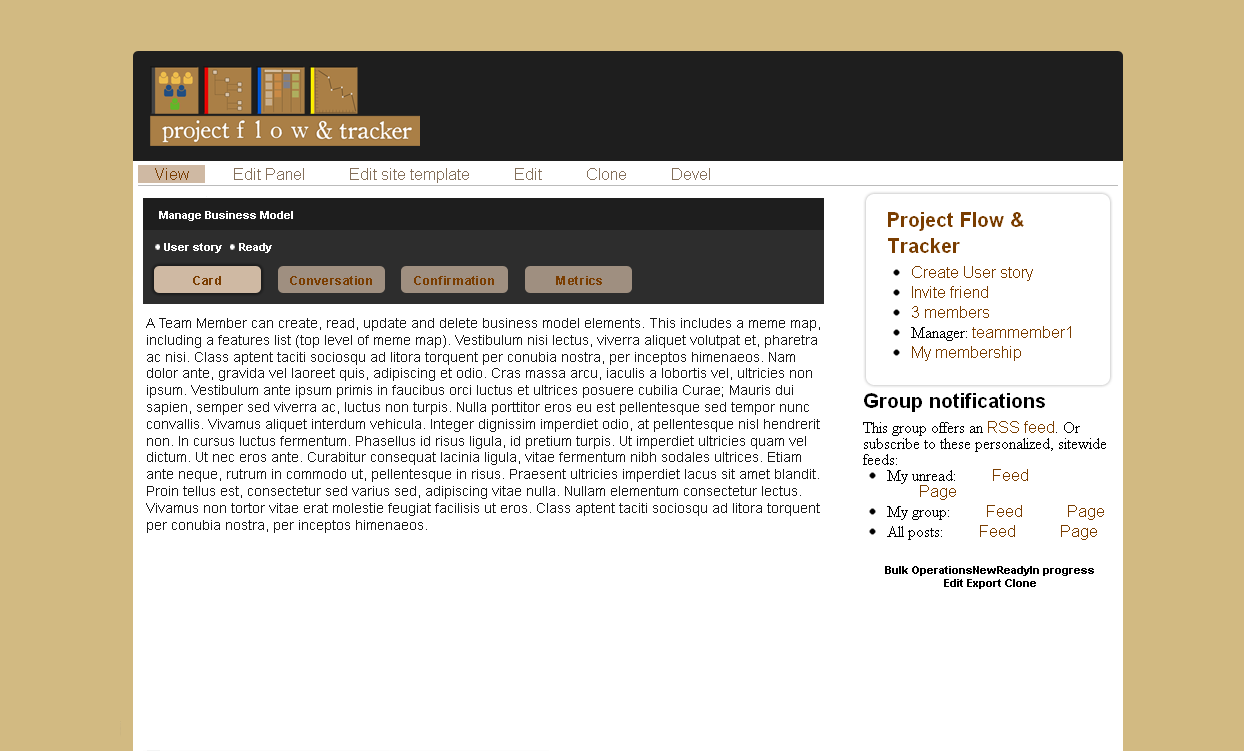
<style>
.page{position:relative;width:1244px;height:751px;background:#ffffff}
.page>*{position:absolute;margin:0}
.t1{font:11px "Arial-BoldMT";color:#ffffff}
.t2{font:12.4px "Arial-BoldMT";color:#7a3d00}
.t3{font:14px "ArialMT";color:#181818}
.t4{font:11px "Arial-BoldMT";color:#000000}
</style>
<div class="page">
<p class="t1" style="left:159px;top:211px;width:134px;height:10px">Manage Business Model</p>
<p class="t1" style="left:164px;top:243px;width:58px;height:10px">User story</p>
<p class="t1" style="left:239px;top:243px;width:33px;height:10px">Ready</p>
<p class="t2" style="left:193px;top:276px;width:28px;height:9px">Card</p>
<p class="t2" style="left:290px;top:276px;width:82px;height:9px">Conversation</p>
<p class="t2" style="left:414px;top:276px;width:80px;height:9px">Confirmation</p>
<p class="t2" style="left:556px;top:276px;width:46px;height:9px">Metrics</p>
<p class="t3" style="left:146px;top:318px;width:674px;height:215px">A Team Member can create, read, update and delete business model elements. This includes a meme map, including a features list (top level of meme map). Vestibulum nisi lectus, viverra aliquet volutpat et, pharetra ac nisi. Class aptent taciti sociosqu ad litora torquent per conubia nostra, per inceptos himenaeos. Nam dolor ante, gravida vel laoreet quis, adipiscing et odio. Cras massa arcu, iaculis a lobortis vel, ultricies non ipsum. Vestibulum ante ipsum primis in faucibus orci luctus et ultrices posuere cubilia Curae; Mauris dui sapien, semper sed viverra ac, luctus non turpis. Nulla porttitor eros eu est pellentesque sed tempor nunc convallis. Vivamus aliquet interdum vehicula. Integer dignissim imperdiet odio, at pellentesque nisl hendrerit non. In cursus luctus fermentum. Phasellus id risus ligula, id pretium turpis. Ut imperdiet ultricies quam vel dictum. Ut nec eros ante. Curabitur consequat lacinia ligula, vitae fermentum nibh sodales ultrices. Etiam ante neque, rutrum in commodo ut, pellentesque in risus. Praesent ultricies imperdiet lacus sit amet blandit. Proin tellus est, consectetur sed varius sed, adipiscing vitae nulla. Nullam elementum consectetur lectus. Vivamus non tortor vitae erat molestie feugiat facilisis ut eros. Class aptent taciti sociosqu ad litora torquent per conubia nostra, per inceptos himenaeos.</p>
<p class="t4" style="left:885px;top:566px;width:209px;height:23px;text-align:center">Bulk OperationsNewReadyIn progress<br>Edit Export Clone</p>
</div>
